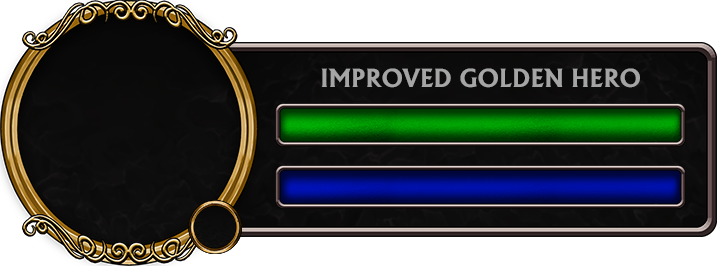
<style>
.page{position:relative;width:717px;height:266px;background:#ffffff}
.page>*{position:absolute;margin:0}
.t1{font:24px "AlbertusBold-Regular";color:#a5a5a5}
</style>
<div class="page">
<p class="t1" style="left:321px;top:68px;width:319px;height:20px">IMPROVED GOLDEN HERO</p>
</div>
